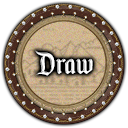
<style>
.page{position:relative;width:128px;height:128px;background:#ffffff}
.page>*{position:absolute;margin:0}
.t1{font:36px "EnchantedLand";color:#ffffff}
</style>
<div class="page">
<p class="t1" style="left:35px;top:50px;width:58px;height:26px">Draw</p>
</div>
